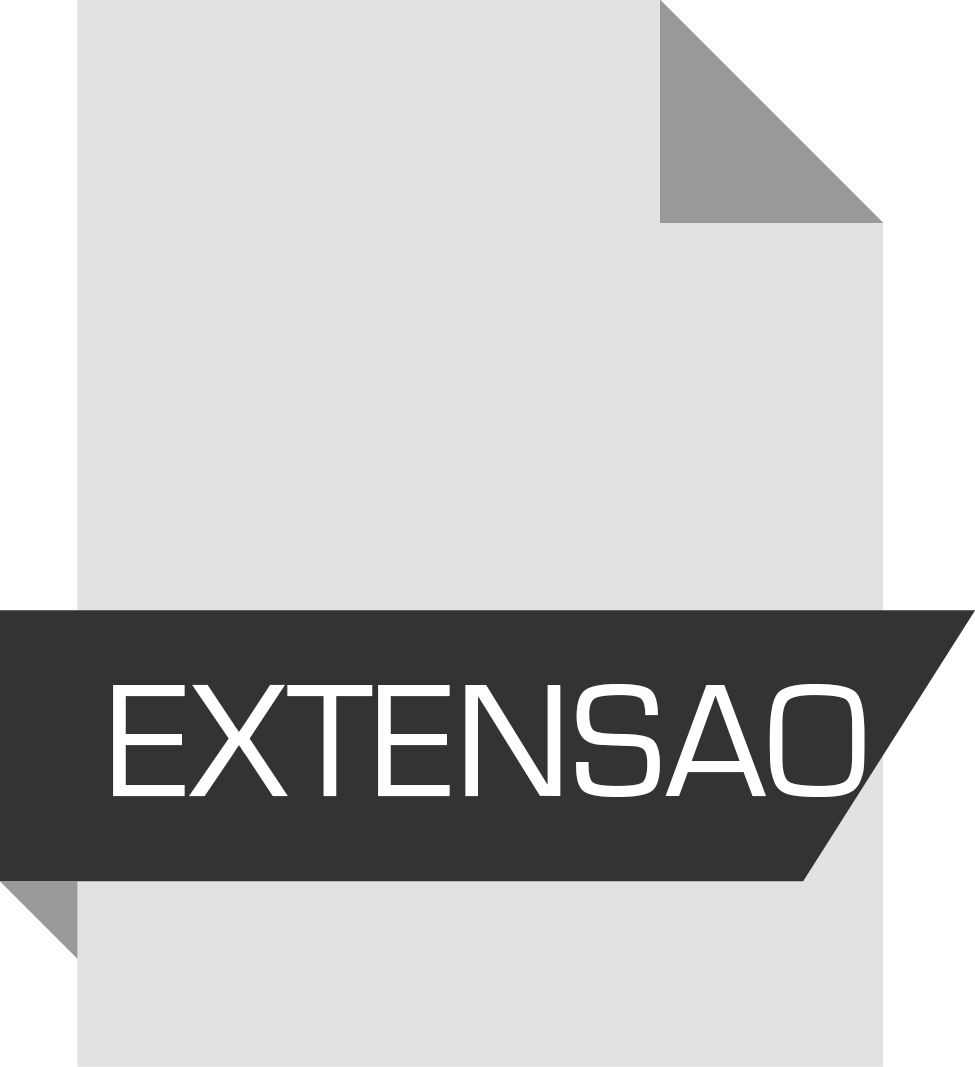
<style>
.page{position:relative;width:975px;height:1067px;background:#e2e2e2}
.page>*{position:absolute;margin:0}
.t1{font:166.7px "MicroSquare-Regular";color:#ffffff}
</style>
<div class="page">
<p class="t1" style="left:113px;top:684px;width:752px;height:113px">EXTENSAO</p>
</div>
